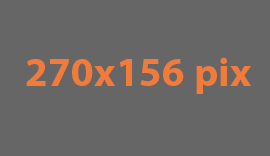
<style>
.page{position:relative;width:270px;height:156px;background:#666666}
.page>*{position:absolute;margin:0}
.t1{font:40.7px "MyriadPro-Bold";letter-spacing:0.012em;color:#f17b3a}
</style>
<div class="page">
<p class="t1" style="left:26px;top:57px;width:225px;height:37px">270x156 pix</p>
</div>
